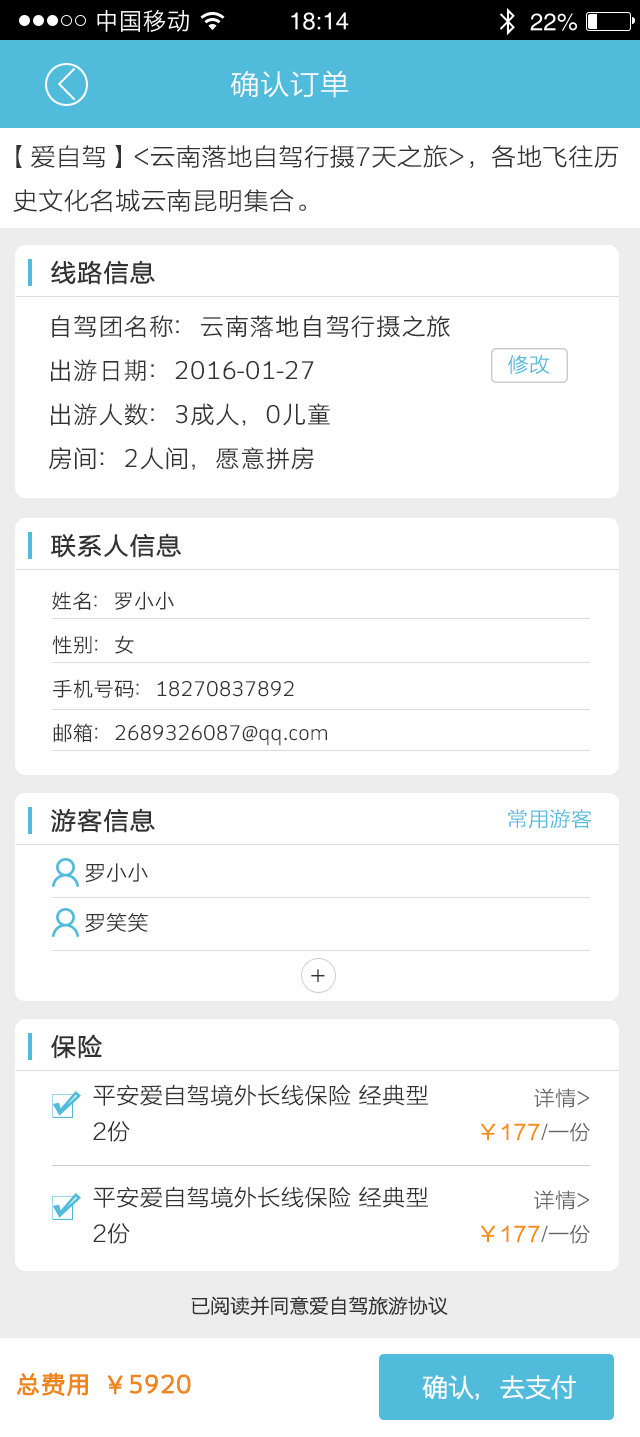
<style>
.page{position:relative;width:640px;height:1437px;background:#ffffff}
.page>*{position:absolute;margin:0}
.t1{font:28px "STHeitiSC-Light";letter-spacing:-0.04em;color:#ffffff;scale:1.03 1}
.t2{font:24px/44px "STHeitiSC-Light";letter-spacing:-0.04em;color:#333333;scale:1.03 1}
.t3{font:24px "STHeitiSC-Light";letter-spacing:-0.04em;color:#333333;font-weight:bold;scale:1.03 1}
.t4{font:24px/44px "STHeitiSC-Light";letter-spacing:0.02em;color:#333333;scale:1.03 1}
.t5{font:20px "STHeitiSC-Light";letter-spacing:-0.04em;color:#50bbdb;scale:1.03 1}
.t6{font:20px/44px "STHeitiSC-Light";color:#333333;scale:1.03 1}
.t7{font:20px/44px "STHeitiSC-Light";letter-spacing:-0.04em;color:#333333;scale:1.03 1}
.t8{font:20px/50px "STHeitiSC-Light";letter-spacing:-0.04em;color:#333333;scale:1.03 1}
.t9{font:24px "STHeitiSC-Light";letter-spacing:-0.04em;color:#333333;scale:1.03 1}
.t10{font:22px/36px "STHeitiSC-Light";letter-spacing:-0.04em;color:#333333;scale:1.03 1}
.t11{font:20px "STHeitiSC-Light";letter-spacing:-0.04em;color:#666666;scale:1.03 1}
.t12{font:20px "STHeitiSC-Light";letter-spacing:-0.04em;color:#f98d0d;font-weight:bold;scale:1.03 1}
.t13{font:20px "STHeitiSC-Light";letter-spacing:-0.04em;color:#333333;scale:1.03 1}
.t14{font:24px "STHeitiSC-Light";color:#f0851a;font-weight:bold;scale:1.03 1}
.t15{font:26px "STHeitiSC-Light";letter-spacing:-0.04em;color:#ffffff;scale:1.03 1}
.t16{font:20px "STHeitiSC-Light";letter-spacing:-0.04em;color:#ffffff;scale:1.03 1}
</style>
<div class="page">
<p class="t1" style="left:230px;top:70px;width:119px;height:28px">确认订单</p>
<p class="t2" style="left:13px;top:145px;width:605px;height:67px">【爱自驾】&lt;云南落地自驾行摄7天之旅&gt;，各地飞往历<br> 史文化名城云南昆明集合。</p>
<p class="t3" style="left:51px;top:260px;width:104px;height:25px">线路信息</p>
<p class="t4" style="left:49px;top:315px;width:401px;height:155px">自驾团名称：云南落地自驾行摄之旅<br>出游日期：2016-01-27<br>出游人数：3成人，0儿童<br>房间：2人间，愿意拼房</p>
<p class="t5" style="left:508px;top:355px;width:42px;height:19px">修改</p>
<p class="t3" style="left:51px;top:533px;width:130px;height:25px">联系人信息</p>
<p class="t6" style="left:52px;top:591px;width:275px;height:155px"><span class="t7"> </span>姓名：罗小小<br> 性别：女<br> 手机号码：18270837892<br> 邮箱：2689326087@qq.com</p>
<p class="t3" style="left:51px;top:808px;width:104px;height:25px">游客信息</p>
<p class="t5" style="left:508px;top:809px;width:84px;height:20px">常用游客</p>
<p class="t8" style="left:85px;top:863px;width:63px;height:70px">罗小小<br>罗笑笑</p>
<p class="t9" style="left:311px;top:969px;width:14px;height:13px">+</p>
<p class="t3" style="left:51px;top:1034px;width:51px;height:25px">保险</p>
<p class="t10" style="left:93px;top:1084px;width:335px;height:58px">平安爱自驾境外长线保险 经典型<br>2份</p>
<p class="t11" style="left:534px;top:1088px;width:55px;height:20px">详情&gt;</p>
<p class="t12" style="left:481px;top:1122px;width:109px;height:20px">￥177<span class="t11">/一份</span></p>
<p class="t10" style="left:93px;top:1186px;width:335px;height:58px">平安爱自驾境外长线保险 经典型<br>2份</p>
<p class="t11" style="left:534px;top:1190px;width:55px;height:20px">详情&gt;</p>
<p class="t12" style="left:481px;top:1224px;width:109px;height:20px">￥177<span class="t11">/一份</span></p>
<p class="t13" style="left:191px;top:1296px;width:257px;height:20px">已阅读并同意爱自驾旅游协议</p>
<p class="t14" style="left:16px;top:1372px;width:175px;height:24px">总费用  ￥5920</p>
<p class="t15" style="left:422px;top:1375px;width:154px;height:25px"><span class="t16"> </span>确认，去支付</p>
</div>
